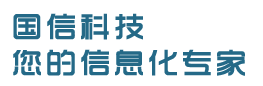
<style>
.page{position:relative;width:263px;height:86px;background:#ffffff}
.page>*{position:absolute;margin:0}
.t1{font:30px "TRENDS";letter-spacing:0.1em;color:#246987;font-weight:bold}
</style>
<div class="page">
<p class="t1" style="left:13px;top:13px;width:232px;height:63px">国信科技<br>您的信息化专家</p>
</div>
